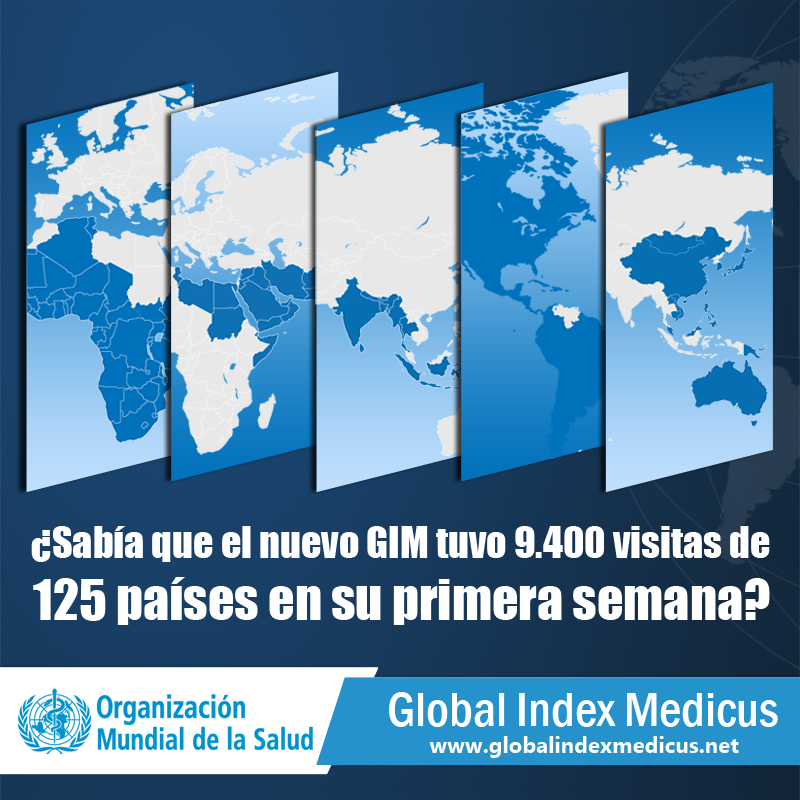
<style>
.page{position:relative;width:800px;height:800px}
.page>*{position:absolute;margin:0}
.t1{font:40px "Impact";color:#ffffff}
.t2{font:52px "Impact";color:#ffffff}
.t3{font:49.7px "FranklinGothic-MediumCond";color:#ffffff}
.t4{font:22.2px "Gadugi-Bold";color:#ffffff}
</style>
<div class="page">
<p class="t1" style="left:31px;top:526px;width:739px;height:99px;text-align:right">¿Sabía que el nuevo GIM tuvo 9.400 visitas de<br><span class="t2">125 países en su primera semana?</span></p>
<p class="t3" style="left:389px;top:692px;width:389px;height:35px">Global Index Medicus</p>
<p class="t4" style="left:429px;top:736px;width:310px;height:22px">www.globalindexmedicus.net</p>
</div>
